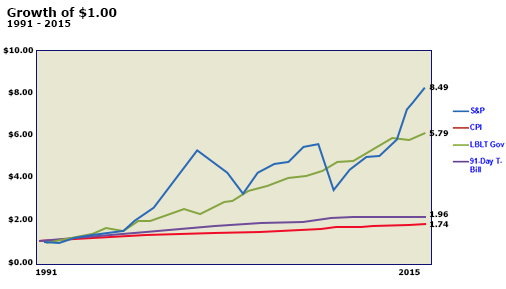
<style>
.page{position:relative;width:506px;height:289px;background:#e8e7d1}
.page>*{position:absolute;margin:0}
.t1{font:12.1px "Verdana-Bold";color:#000000}
.t2{font:9.4px "Verdana-Bold";color:#000000}
.t3{font:7.7px "Verdana-Bold";color:#000000}
</style>
<div class="page">
<p class="t1" style="left:7px;top:7px;width:110px;height:12px">Growth of $1.00</p>
<p class="t2" style="left:7px;top:20px;width:64px;height:7px">1991 - 2015</p>
<p class="t3" style="left:3px;top:46px;width:31px;height:9px">$10.00</p>
<p class="t3" style="left:8px;top:88px;width:25px;height:9px">$8.00</p>
<p class="t3" style="left:429px;top:84px;width:20px;height:7px">8.49</p>
<p class="t3" style="left:8px;top:130px;width:25px;height:9px">$6.00</p>
<p class="t3" style="left:429px;top:130px;width:20px;height:7px">5.79</p>
<p class="t3" style="left:8px;top:172px;width:25px;height:9px">$4.00</p>
<p class="t3" style="left:8px;top:215px;width:25px;height:9px">$2.00</p>
<p class="t3" style="left:430px;top:211px;width:19px;height:7px">1.96</p>
<p class="t3" style="left:430px;top:221px;width:19px;height:7px">1.74</p>
<p class="t3" style="left:8px;top:258px;width:25px;height:9px">$0.00</p>
<p class="t3" style="left:36px;top:269px;width:21px;height:7px">1991</p>
<p class="t3" style="left:398px;top:269px;width:22px;height:7px">2015</p>
</div>
